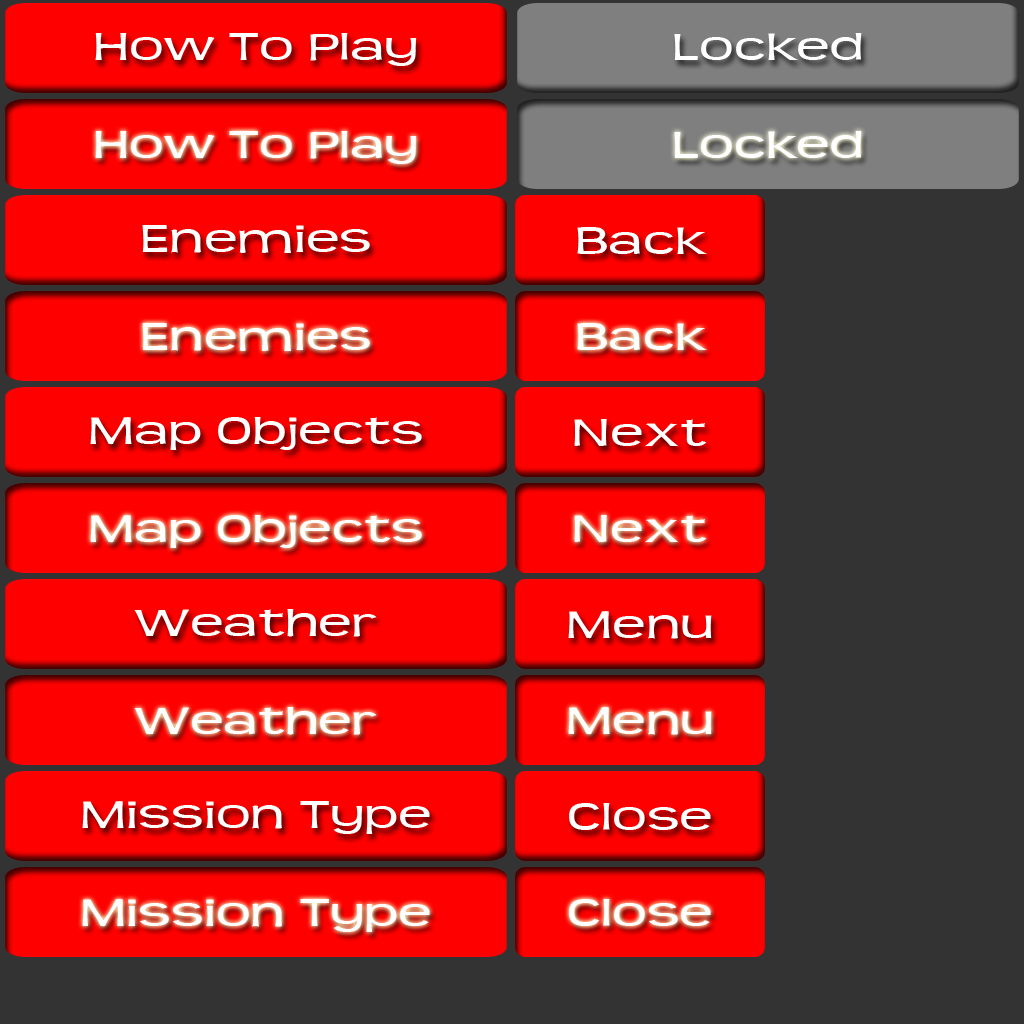
<style>
.page{position:relative;width:1024px;height:1024px;background:#ff0000}
.page>*{position:absolute;margin:0}
.t1{font:42px "Teen";color:#fefefe;scale:1.43 1}
</style>
<div class="page">
<p class="t1" style="left:95px;top:33px;width:322px;height:33px">How To Play</p>
<p class="t1" style="left:674px;top:33px;width:188px;height:27px">Locked</p>
<p class="t1" style="left:95px;top:131px;width:322px;height:33px">How To Play</p>
<p class="t1" style="left:674px;top:131px;width:188px;height:27px">Locked</p>
<p class="t1" style="left:142px;top:225px;width:228px;height:28px">Enemies</p>
<p class="t1" style="left:577px;top:227px;width:130px;height:27px">Back</p>
<p class="t1" style="left:142px;top:323px;width:228px;height:28px">Enemies</p>
<p class="t1" style="left:577px;top:323px;width:130px;height:27px">Back</p>
<p class="t1" style="left:90px;top:417px;width:332px;height:33px">Map Objects</p>
<p class="t1" style="left:574px;top:419px;width:133px;height:28px">Next</p>
<p class="t1" style="left:90px;top:515px;width:332px;height:33px">Map Objects</p>
<p class="t1" style="left:574px;top:515px;width:133px;height:28px">Next</p>
<p class="t1" style="left:134px;top:609px;width:243px;height:28px">Weather</p>
<p class="t1" style="left:568px;top:611px;width:144px;height:28px">Menu</p>
<p class="t1" style="left:134px;top:707px;width:243px;height:28px">Weather</p>
<p class="t1" style="left:568px;top:707px;width:144px;height:28px">Menu</p>
<p class="t1" style="left:82px;top:801px;width:348px;height:33px">Mission Type</p>
<p class="t1" style="left:569px;top:803px;width:142px;height:27px">Close</p>
<p class="t1" style="left:82px;top:899px;width:348px;height:33px">Mission Type</p>
<p class="t1" style="left:569px;top:899px;width:142px;height:27px">Close</p>
</div>
